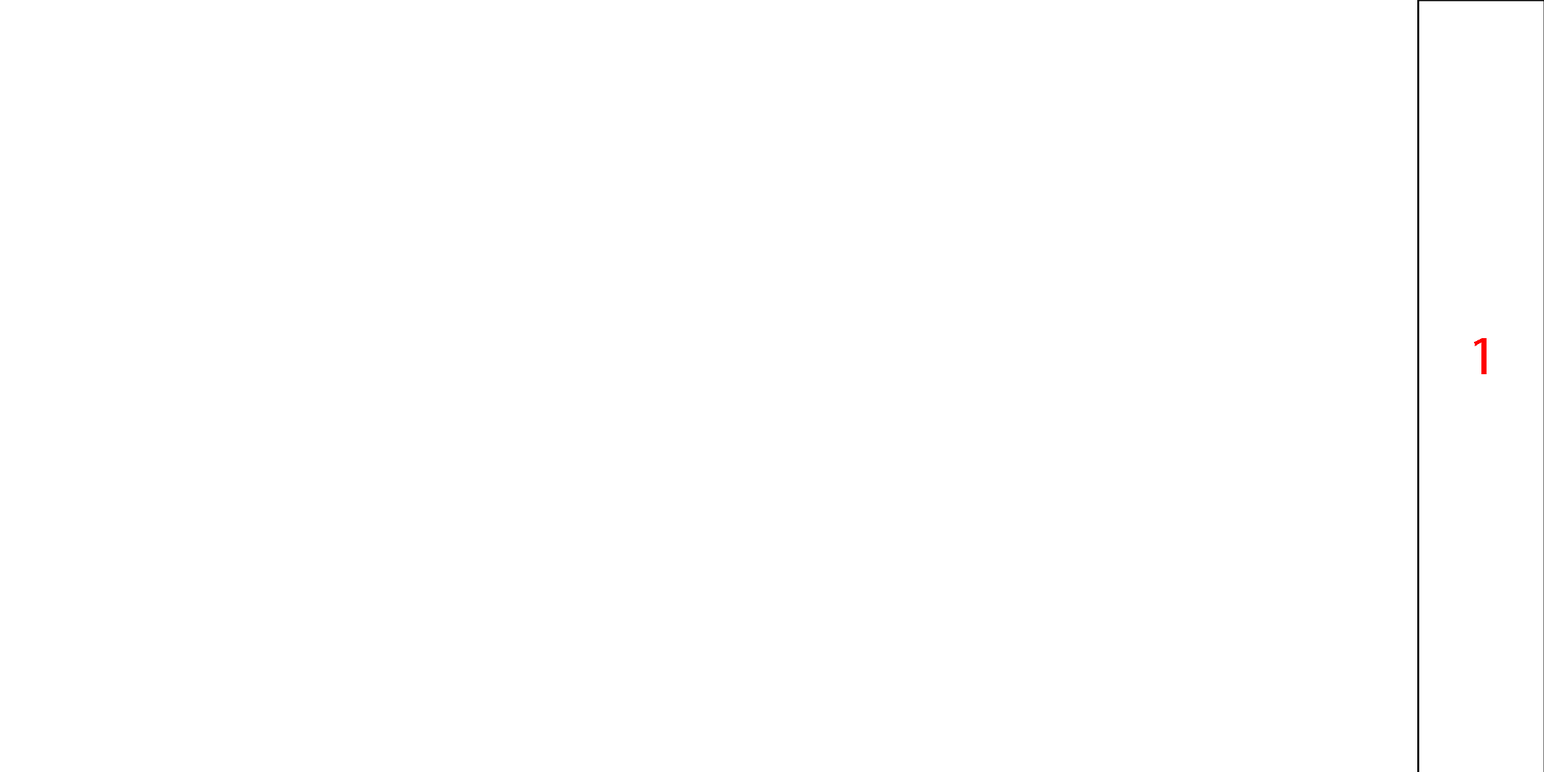
<style>
.page{position:relative;width:1544px;height:772px;background:#ffffff}
.page>*{position:absolute;margin:0}
.t1{font:55.3px "MyriadPro-Regular";color:#ff0000}
</style>
<div class="page">
<p class="t1" style="left:1474px;top:338px;width:13px;height:36px">1</p>
</div>
